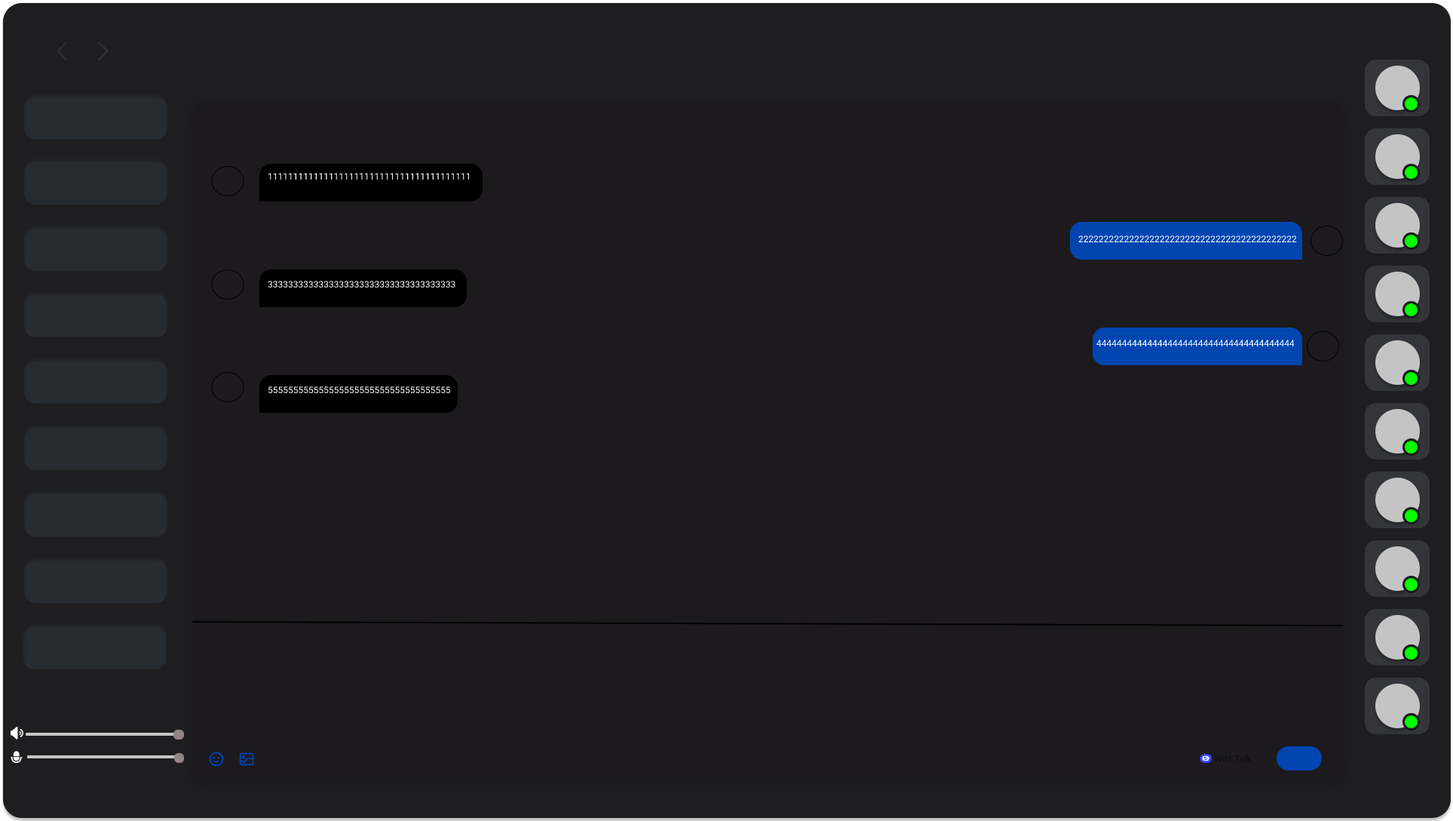
<style>
.page{position:relative;width:1453px;height:821px;background:#1c1a1d}
.page>*{position:absolute;margin:0}
.t1{font:9px "Roboto-Regular";color:#ffffff}
.t2{font:9px "Roboto-Regular";color:#0c0c0c}
.t3{font:6px "Roboto-Regular";color:#b6bfcf}
</style>
<div class="page">
<p class="t1" style="left:268px;top:173px;width:202px;height:6px">1111111111111111111111111111111111111111</p>
<p class="t1" style="left:1078px;top:235px;width:219px;height:7px">2222222222222222222222222222222222222222222</p>
<p class="t1" style="left:268px;top:281px;width:188px;height:7px">3333333333333333333333333333333333333</p>
<p class="t1" style="left:1097px;top:339px;width:198px;height:7px">444444444444444444444444444444444444444</p>
<p class="t1" style="left:268px;top:386px;width:183px;height:8px">555555555555555555555555555555555555</p>
<p class="t2" style="left:1215px;top:755px;width:37px;height:7px">Wits Talk <span class="t3">提供</span></p>
</div>
